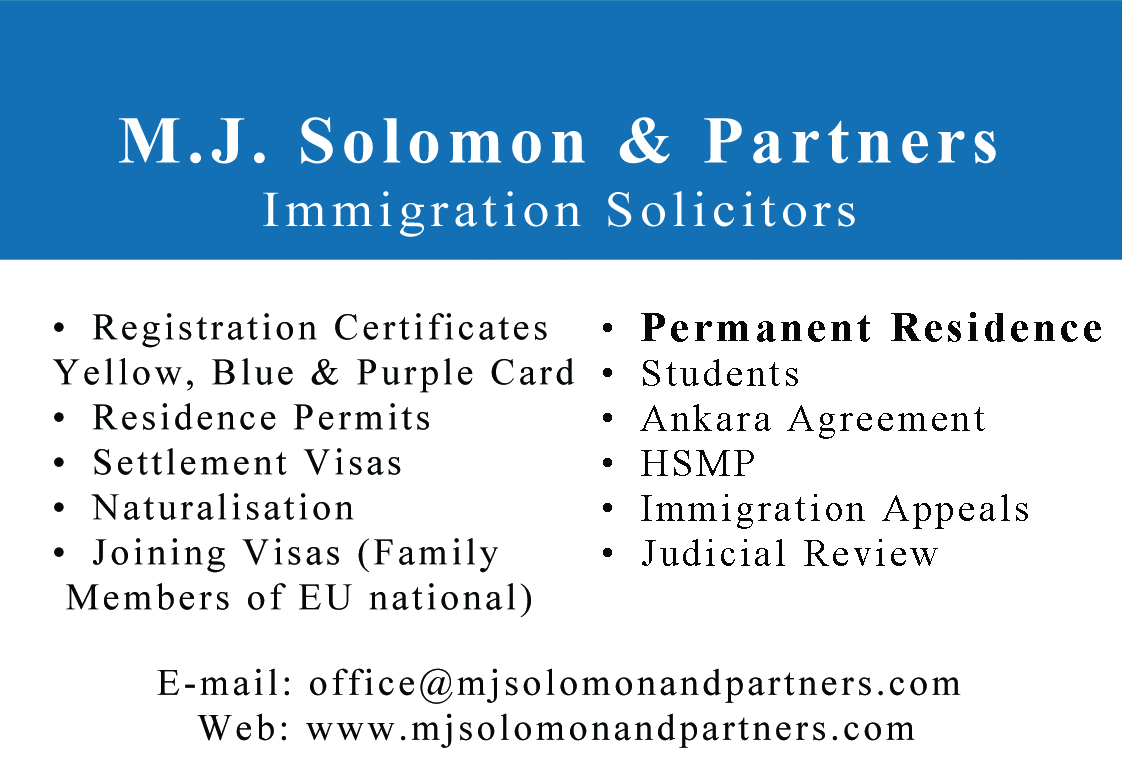
<style>
.page{position:relative;width:1122px;height:768px;background:#ffffff}
.page>*{position:absolute;margin:0}
.t1{font:66.7px "TimesNewRomanPS-BoldMT";letter-spacing:0.1em;color:#ffffff}
.t2{font:50px "TimesNewRomanPSMT";letter-spacing:0.1em;color:#ffffff;scale:1.06 1}
.t3{font:37.5px "TimesNewRomanPSMT";letter-spacing:0.1em;color:#060808}
.t4{font:41.7px "TimesNewRomanPS-BoldMT";letter-spacing:0.1em;color:#060808}
</style>
<div class="page">
<p class="t1" style="left:119px;top:117px;width:877px;height:47px">M.J. Solomon &amp; Partners</p>
<p class="t2" style="left:263px;top:191px;width:592px;height:46px">Immigration Solicitors</p>
<p class="t3" style="left:53px;top:313px;width:521px;height:305px">• Registration Certificates <br>Yellow, Blue &amp; Purple Card<br>• Residence Permits<br>• Settlement Visas <br>• Naturalisation <br>• Joining Visas (Family<br> Members of EU national)</p>
<p class="t3" style="left:603px;top:312px;width:498px;height:254px">• <span class="t4">Permanent Residence<br></span>• Students<br>• Ankara Agreement<br>• HSMP<br>• Immigration Appeals<br>• Judicial Review</p>
<p class="t3" style="left:157px;top:668px;width:804px;height:80px">E-mail: office@mjsolomonandpartners.com<br>   Web: www.mjsolomonandpartners.com</p>
</div>
